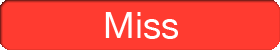
<style>
.page{position:relative;width:280px;height:50px;background:#ff3b30}
.page>*{position:absolute;margin:0}
.t1{font:36.2px "HelveticaNeue";color:#ffffff}
</style>
<div class="page">
<p class="t1" style="left:105px;top:12px;width:73px;height:27px">Miss</p>
</div>
